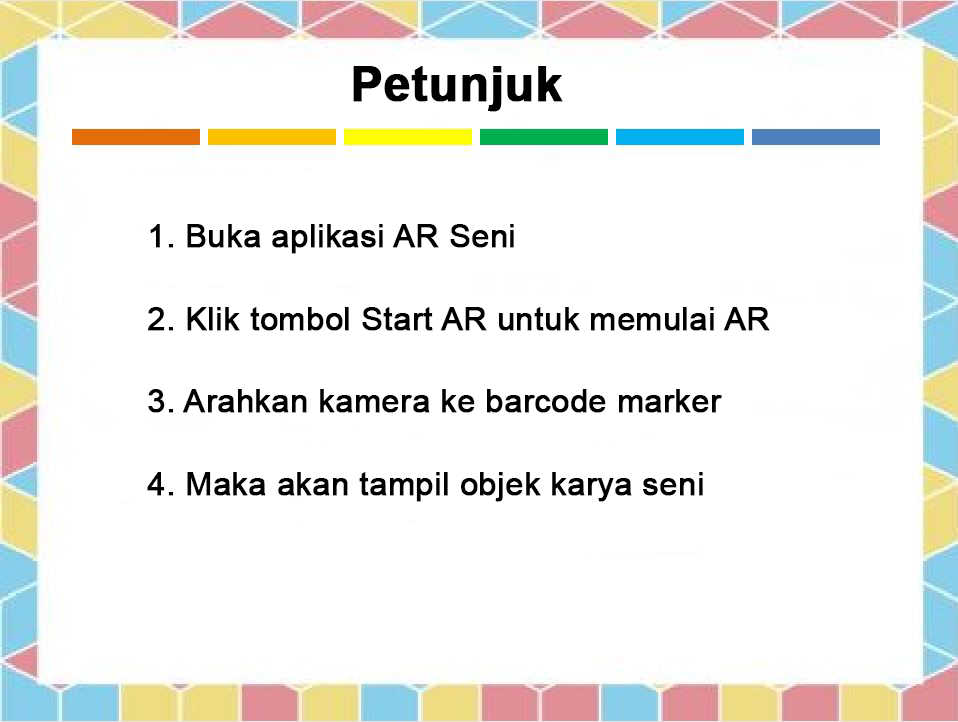
<style>
.page{position:relative;width:958px;height:722px;background:#ffffff}
.page>*{position:absolute;margin:0}
.t1{font:48px "Arial-BoldMT";color:#010000;font-weight:bold}
.t2{font:32px/82.7px "ArialMT";color:#000000;font-weight:bold}
</style>
<div class="page">
<p class="t1" style="left:353px;top:66px;width:210px;height:46px">Petunjuk</p>
<p class="t2" style="left:147px;top:224px;width:623px;height:278px">1. Buka aplikasi AR Seni<br>2. Klik tombol Start AR untuk memulai AR<br>3. Arahkan kamera ke barcode marker<br>4. Maka akan tampil objek karya seni</p>
</div>
